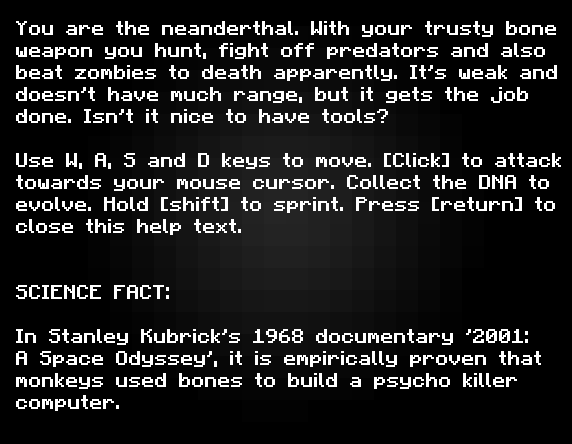
<style>
.page{position:relative;width:572px;height:444px;background:#000000}
.page>*{position:absolute;margin:0}
.t1{font:16px/22px "Minecraftia";color:#ffffff;font-weight:bold}
</style>
<div class="page">
<p class="t1" style="left:16px;top:21px;width:545px;height:390px">You are the neanderthal. With your trusty bone weapon you hunt, fight off predators and also beat zombies to death apparently. It’s weak and doesn’t have much range, but it gets the job done. Isn’t it nice to have tools?<br><br>Use W, A, S and D keys to move. [Click] to attack towards your mouse cursor. Collect the DNA to evolve. Hold [shift] to sprint. Press [return] to close this help text.<br><br><br>SCIENCE FACT:<br><br>In Stanley Kubrick’s 1968 documentary ‘2001:<br>A Space Odyssey’, it is empirically proven that monkeys used bones to build a psycho killer computer.</p>
</div>
